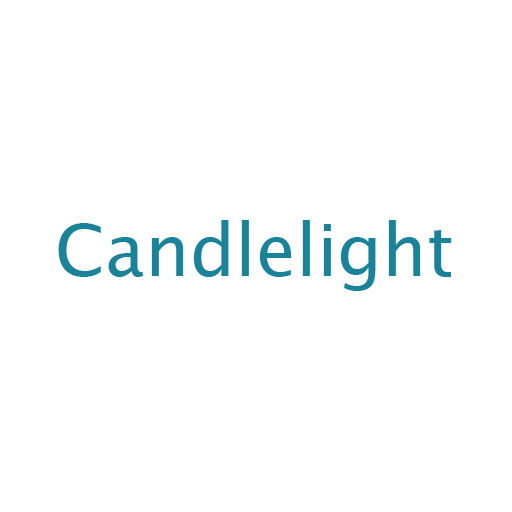
<style>
.page{position:relative;width:512px;height:512px;background:#ffffff}
.page>*{position:absolute;margin:0}
.t1{font:72px "LucidaGrande";color:#1a8299}
</style>
<div class="page">
<p class="t1" style="left:58px;top:220px;width:394px;height:71px">Candlelight</p>
</div>
